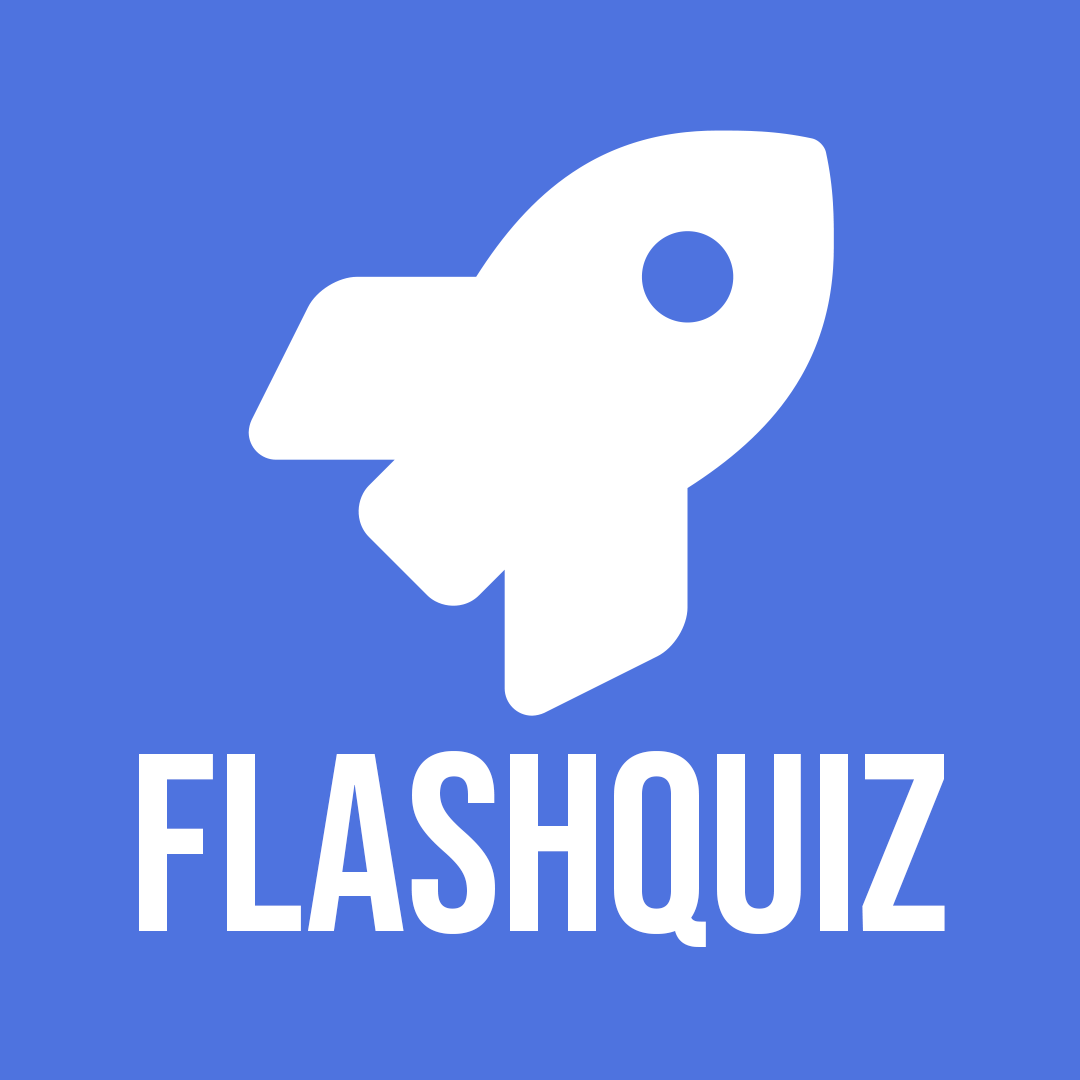
<style>
.page{position:relative;width:1080px;height:1080px;background:#4e73df}
.page>*{position:absolute;margin:0}
.t1{font:253.4px "BebasNeue-Regular";color:#ffffff}
</style>
<div class="page">
<p class="t1" style="left:139px;top:751px;width:806px;height:196px">FLASHqUIZ</p>
</div>
